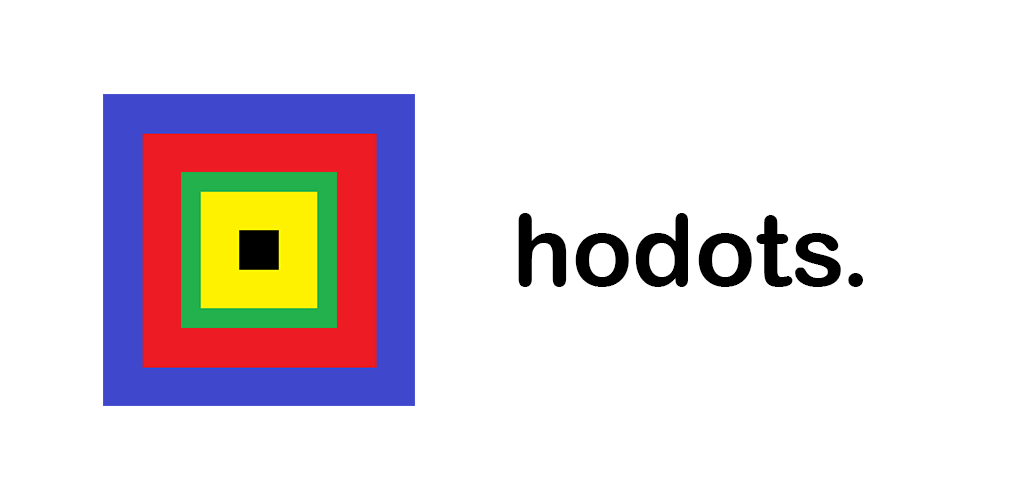
<style>
.page{position:relative;width:1024px;height:500px;background:#ffffff}
.page>*{position:absolute;margin:0}
.t1{font:100px "ArialRoundedMTBold";color:#000000}
</style>
<div class="page">
<p class="t1" style="left:518px;top:213px;width:345px;height:74px">hodots.</p>
</div>
